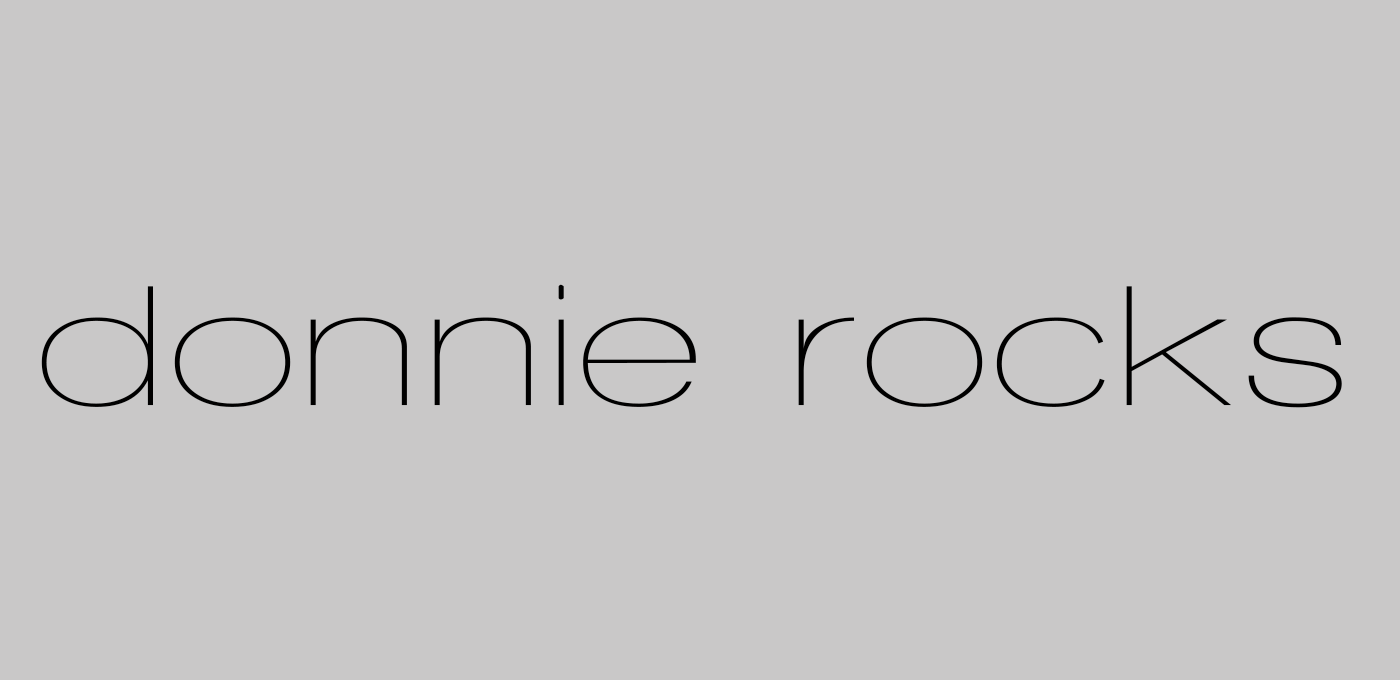
<style>
.page{position:relative;width:1400px;height:680px;background:#c9c8c8}
.page>*{position:absolute;margin:0}
.t1{font:175px "WalkwayExpand";color:#000000}
</style>
<div class="page">
<p class="t1" style="left:41px;top:284px;width:1301px;height:124px">donnie rocks</p>
</div>
